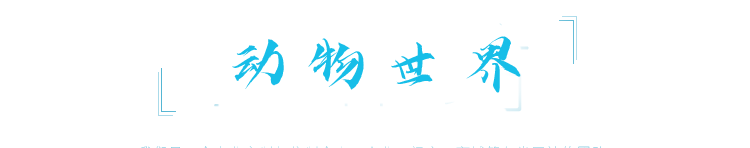
<style>
.page{position:relative;width:750px;height:148px;background:#ffffff}
.page>*{position:absolute;margin:0}
.t1{font:60px "iSlideyunyouti-iFontslianming";color:#17bee8}
</style>
<div class="page">
<p class="t1" style="left:232px;top:36px;width:289px;height:57px">动 物 世 界</p>
</div>
